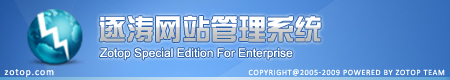
<style>
.page{position:relative;width:450px;height:80px}
.page>*{position:absolute;margin:0}
.t1{font:28px "FZZYJW--GB1-0"}
.t2{font:12px "ArialMT";color:#ffffff}
.t3{font:10px "Calibri";letter-spacing:0.08em;color:#ffffff}
.t4{font:8px "Calibri";letter-spacing:0.08em;color:#ffffff;text-transform:uppercase}
</style>
<div class="page">
<p class="t1" style="left:99px;top:15px;width:222px;height:27px">逐涛网站管理系统</p>
<p class="t2" style="left:100px;top:48px;width:193px;height:12px">Zotop Special Edition For Enterprise</p>
<p class="t3" style="left:4px;top:69px;width:50px;height:8px">zotop.com</p>
<p class="t4" style="left:248px;top:69px;width:197px;height:7px">CopyRight@2005-2009 Powered By Zotop Team</p>
</div>
